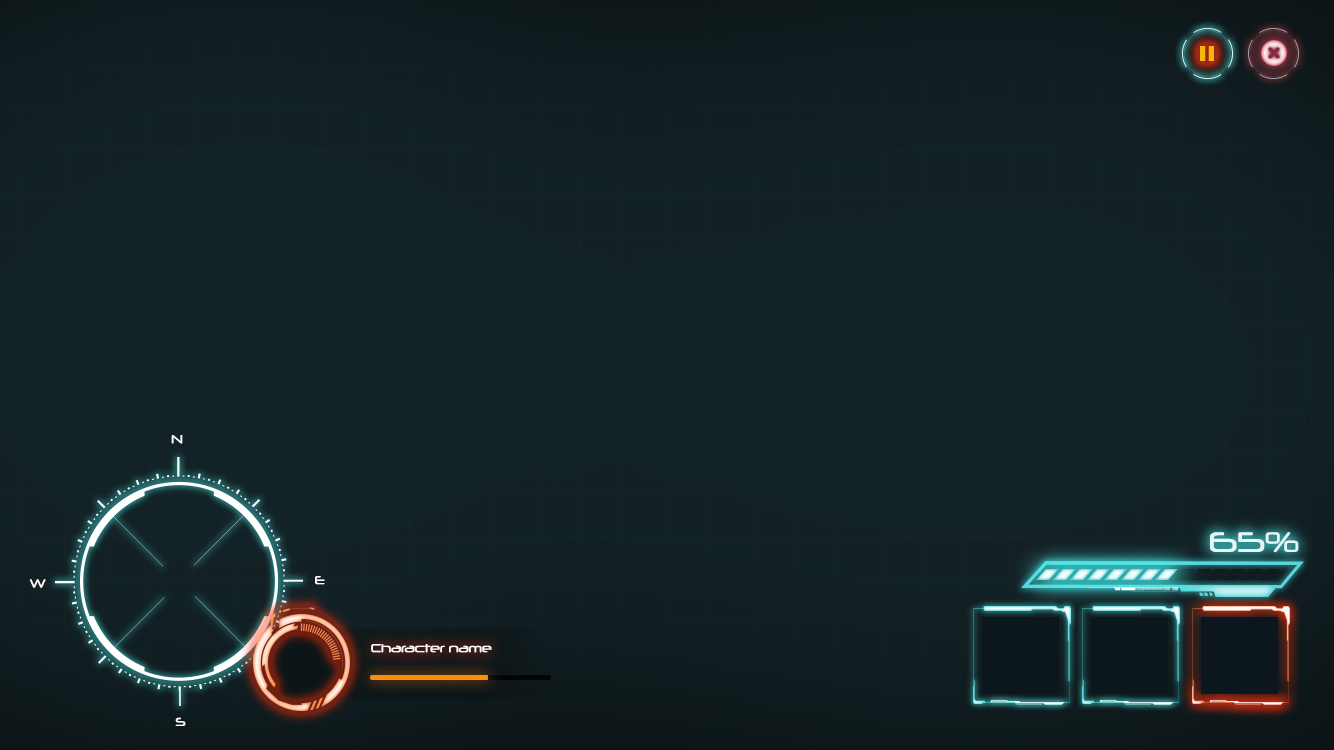
<style>
.page{position:relative;width:1334px;height:750px;background:#132226}
.page>*{position:absolute;margin:0}
.t1{font:11.3px "Neuropol-Regular";color:#fbfbfb}
.t2{font:27.2px "Neuropol-Regular";color:#e5f7f8}
.t3{font:11.3px "Neuropol-Regular";color:#fafcfd}
</style>
<div class="page">
<p class="t1" style="left:171px;top:435px;width:12px;height:9px">N</p>
<p class="t2" style="left:1210px;top:532px;width:89px;height:21px">65%</p>
<p class="t1" style="left:29px;top:579px;width:17px;height:9px">W</p>
<p class="t1" style="left:315px;top:576px;width:10px;height:9px">E</p>
<p class="t3" style="left:371px;top:644px;width:121px;height:9px">Character name</p>
<p class="t1" style="left:175px;top:717px;width:11px;height:9px">S</p>
</div>
